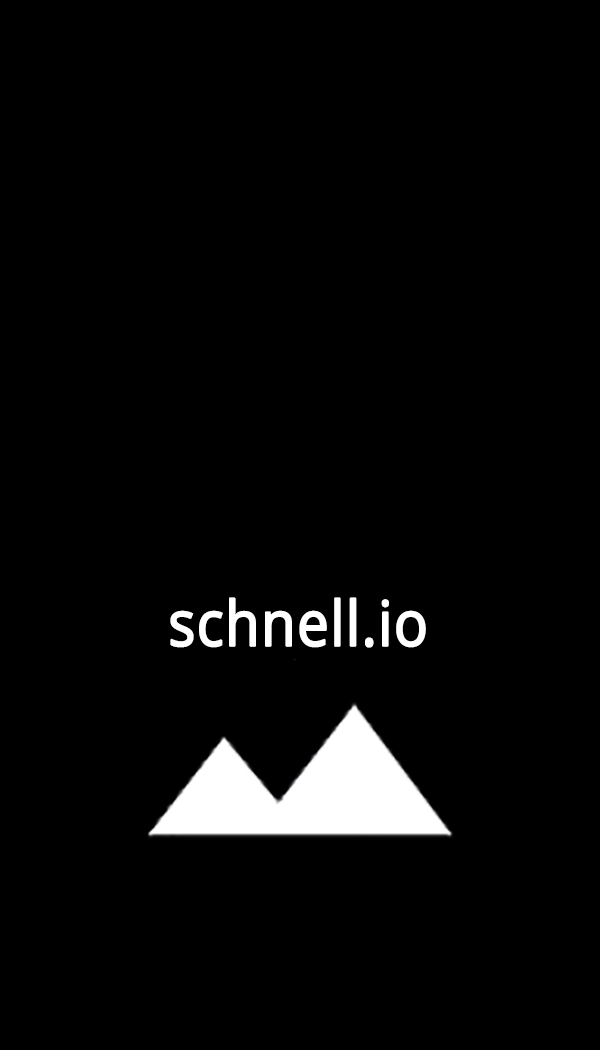
<style>
.page{position:relative;width:600px;height:1050px;background:#000000}
.page>*{position:absolute;margin:0}
.t1{font:62.5px "OpenSans";color:#ffffff;font-weight:bold;scale:0.9 1}
</style>
<div class="page">
<p class="t1" style="left:170px;top:597px;width:256px;height:51px">schnell.io</p>
</div>
